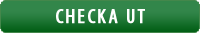
<style>
.page{position:relative;width:200px;height:33px;background:#32864a}
.page>*{position:absolute;margin:0}
.t1{font:20.8px "MyriadPro-Cond";letter-spacing:0.09em;color:#ffffff;font-weight:bold}
</style>
<div class="page">
<p class="t1" style="left:56px;top:9px;width:89px;height:15px">CHECKA UT</p>
</div>
